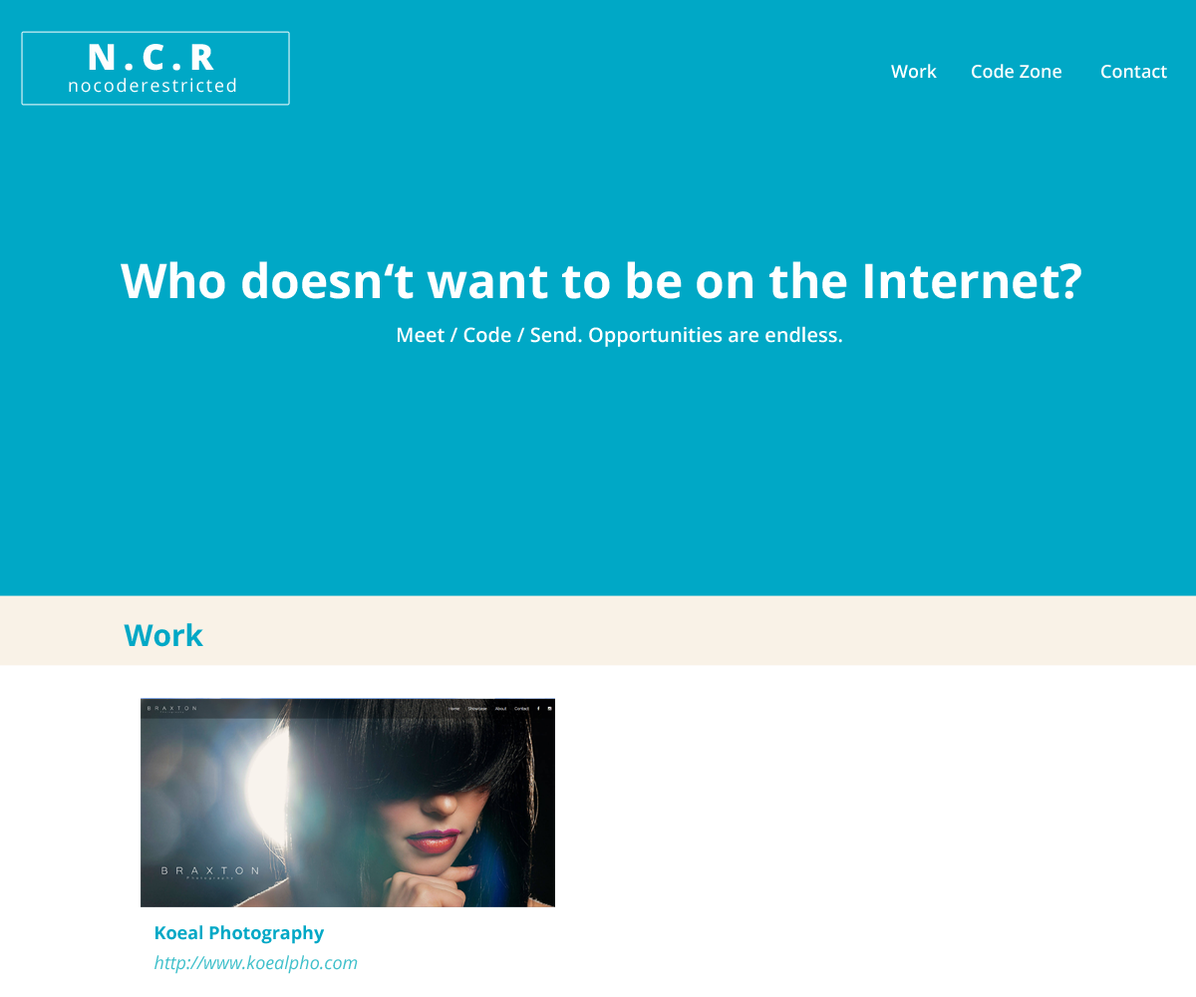
<style>
.page{position:relative;width:1196px;height:997px;background:#00a8c6}
.page>*{position:absolute;margin:0}
.t1{font:35.9px "OpenSans-Extrabold";letter-spacing:0.2em;color:#fefefe}
.t2{font:17.9px "OpenSans-Semibold";color:#ffffff}
.t3{font:17.9px "OpenSans";letter-spacing:0.1em;color:#ffffff}
.t4{font:47.8px "OpenSans-Bold";color:#ffffff}
.t5{font:19.9px "OpenSans-Semibold";color:#ffffff}
.t6{font:29.9px "OpenSans-Bold";color:#00a8c6}
.t7{font:17.9px "OpenSans-Bold";color:#00a8c6}
.t8{font:17.9px "OpenSans-Italic";color:#40c0cb}
</style>
<div class="page">
<p class="t1" style="left:89px;top:44px;width:125px;height:27px">N.C.R</p>
<p class="t2" style="left:891px;top:64px;width:46px;height:15px">Work</p>
<p class="t2" style="left:972px;top:64px;width:90px;height:15px">Code Zone</p>
<p class="t2" style="left:1102px;top:65px;width:65px;height:14px">Contact</p>
<p class="t3" style="left:69px;top:78px;width:167px;height:15px">nocoderestricted</p>
<p class="t4" style="left:121px;top:261px;width:961px;height:38px">Who doesn‘t want to be on the Internet?</p>
<p class="t5" style="left:398px;top:326px;width:444px;height:21px">Meet / Code / Send. Opportunities are endless.</p>
<p class="t6" style="left:124px;top:623px;width:79px;height:24px">Work</p>
<p class="t7" style="left:156px;top:925px;width:169px;height:19px">Koeal Photography</p>
<p class="t8" style="left:155px;top:955px;width:203px;height:19px">http://www.koealpho.com</p>
</div>
